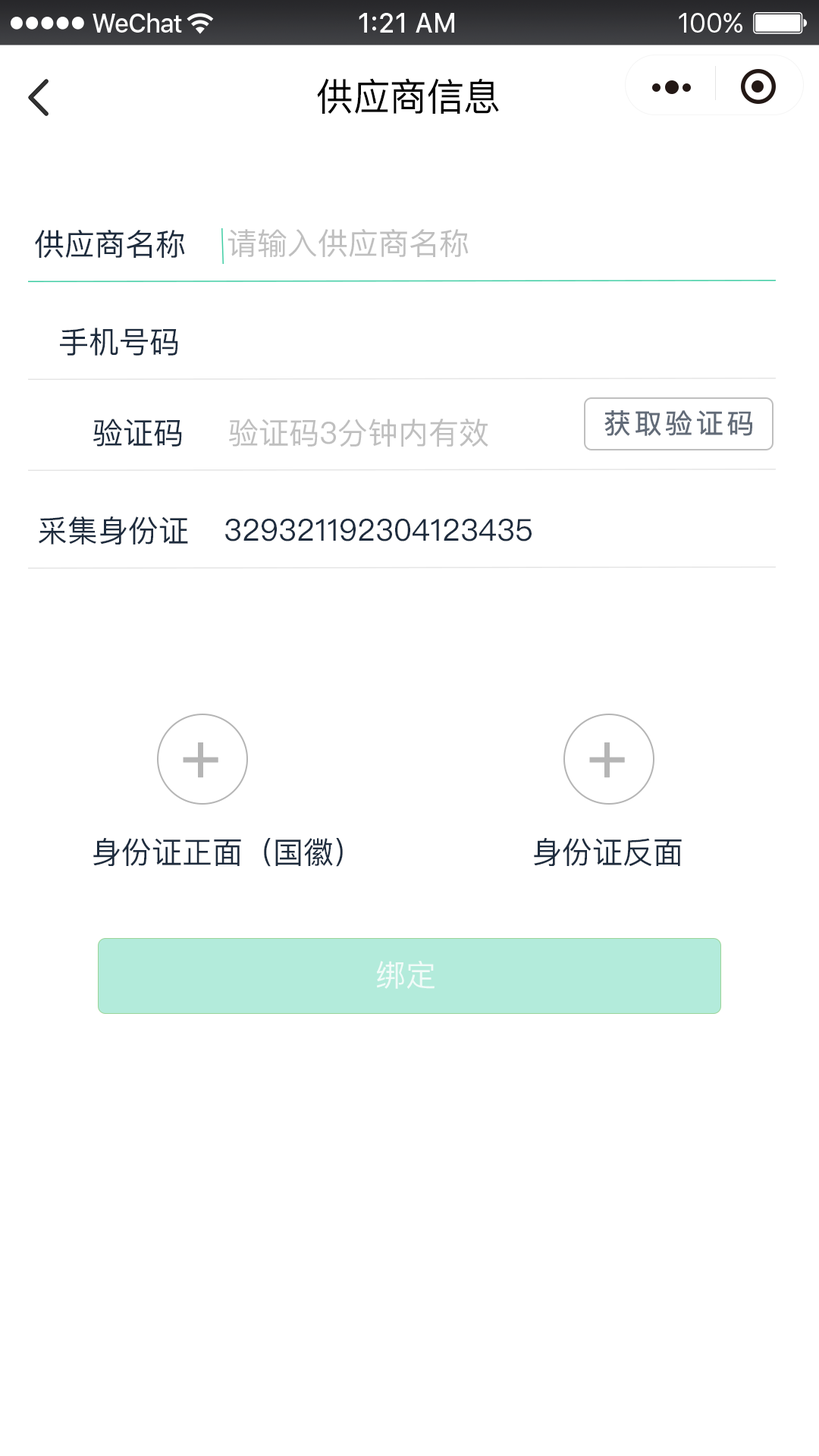
<style>
.page{position:relative;width:819px;height:1456px;background:#ffffff}
.page>*{position:absolute;margin:0}
.t1{font:37.9px "PingFangSC-Regular";color:#000000}
.t2{font:30.3px "PingFangSC-Regular";color:#1e2c3e}
.t3{font:30.3px "PingFangSC-Regular";color:#bfbfbf}
.t4{font:27.3px "PingFangSC-Regular";letter-spacing:0.1em;color:#626b78;font-weight:bold}
.t5{font:68.2px "PingFangSC-Regular";letter-spacing:0.1em;color:#b5b5b5;font-weight:bold}
.t6{font:30.3px "PingFangSC-Regular";color:#ffffff}
</style>
<div class="page">
<p class="t1" style="left:317px;top:78px;width:182px;height:36px">供应商信息</p>
<p class="t2" style="left:35px;top:230px;width:150px;height:28px">供应商名称</p>
<p class="t3" style="left:227px;top:229px;width:242px;height:28px">请输入供应商名称</p>
<p class="t2" style="left:60px;top:328px;width:118px;height:28px">手机号码</p>
<p class="t4" style="left:604px;top:410px;width:148px;height:26px">获取验证码</p>
<p class="t2" style="left:93px;top:419px;width:89px;height:28px">验证码</p>
<p class="t3" style="left:229px;top:419px;width:259px;height:28px">验证码3分钟内有效</p>
<p class="t2" style="left:39px;top:516px;width:149px;height:28px">采集身份证</p>
<p class="t2" style="left:225px;top:519px;width:307px;height:22px">329321192304123435</p>
<p class="t5" style="left:183px;top:742px;width:35px;height:36px">+</p>
<p class="t5" style="left:589px;top:742px;width:36px;height:36px">+</p>
<p class="t2" style="left:93px;top:838px;width:250px;height:29px">身份证正面（国徽）</p>
<p class="t2" style="left:534px;top:838px;width:148px;height:28px">身份证反面</p>
<p class="t6" style="left:376px;top:961px;width:59px;height:28px;opacity:0.8">绑定</p>
</div>
